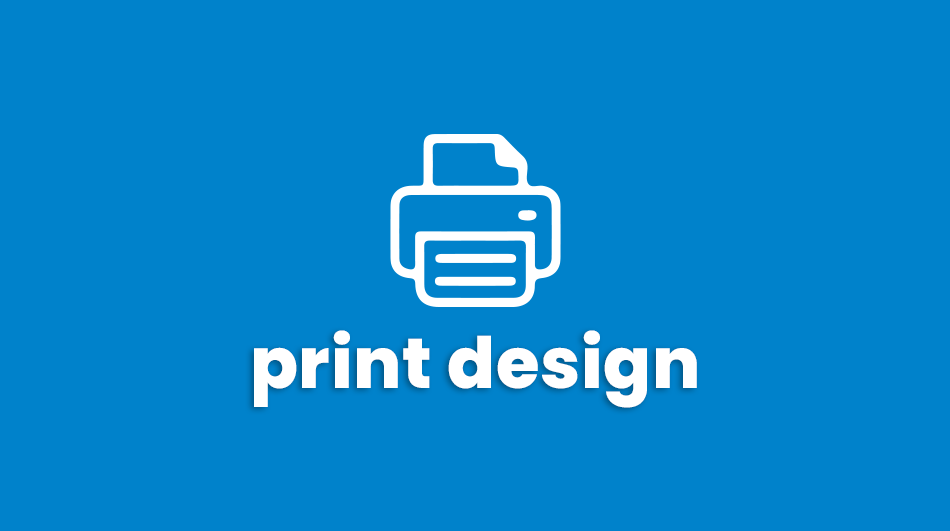
<style>
.page{position:relative;width:950px;height:531px;background:#0082cb}
.page>*{position:absolute;margin:0}
.t1{font:70.7px "Poppins-ExtraBold";letter-spacing:0.01em;color:#ffffff}
</style>
<div class="page">
<p class="t1" style="left:254px;top:330px;width:443px;height:78px">print design</p>
</div>
